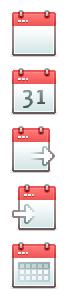
<style>
.page{position:relative;width:68px;height:300px;background:#ffffff}
.page>*{position:absolute;margin:0}
.t1{font:25.5px "InfoOTText-Regular";letter-spacing:0.1em}
</style>
<div class="page">
<p class="t1" style="left:23px;top:89px;width:21px;height:19px">31</p>
<p class="t1" style="left:24px;top:89px;width:21px;height:19px">31</p>
</div>
